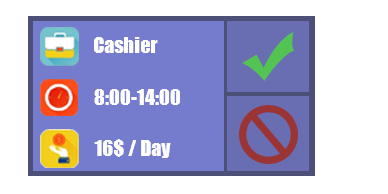
<style>
.page{position:relative;width:388px;height:194px;background:#ffffff}
.page>*{position:absolute;margin:0}
.t1{font:20px "Impact";color:#ffffff}
</style>
<div class="page">
<p class="t1" style="left:94px;top:37px;width:64px;height:16px">Cashier</p>
<p class="t1" style="left:94px;top:89px;width:86px;height:16px">8:00-14:00</p>
<p class="t1" style="left:94px;top:139px;width:77px;height:19px">16$ / Day</p>
</div>
